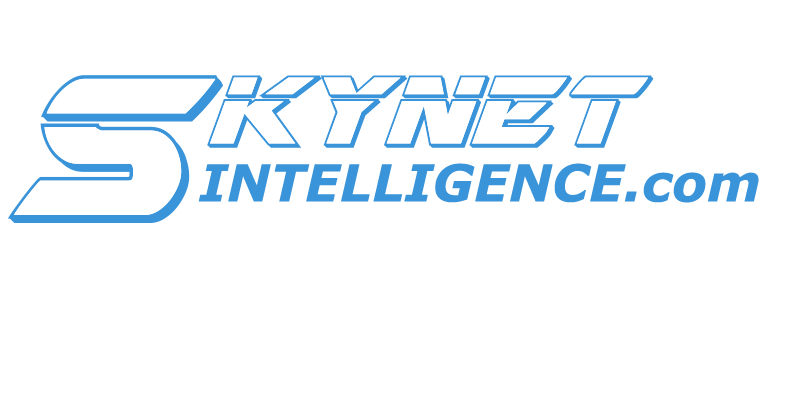
<style>
.page{position:relative;width:800px;height:400px;background:#ffffff}
.page>*{position:absolute;margin:0}
.t1{font:51px "Verdana-BoldItalic";color:#3a94d9}
</style>
<div class="page">
<p class="t1" style="left:198px;top:163px;width:561px;height:40px">INTELLIGENCE.com</p>
</div>
